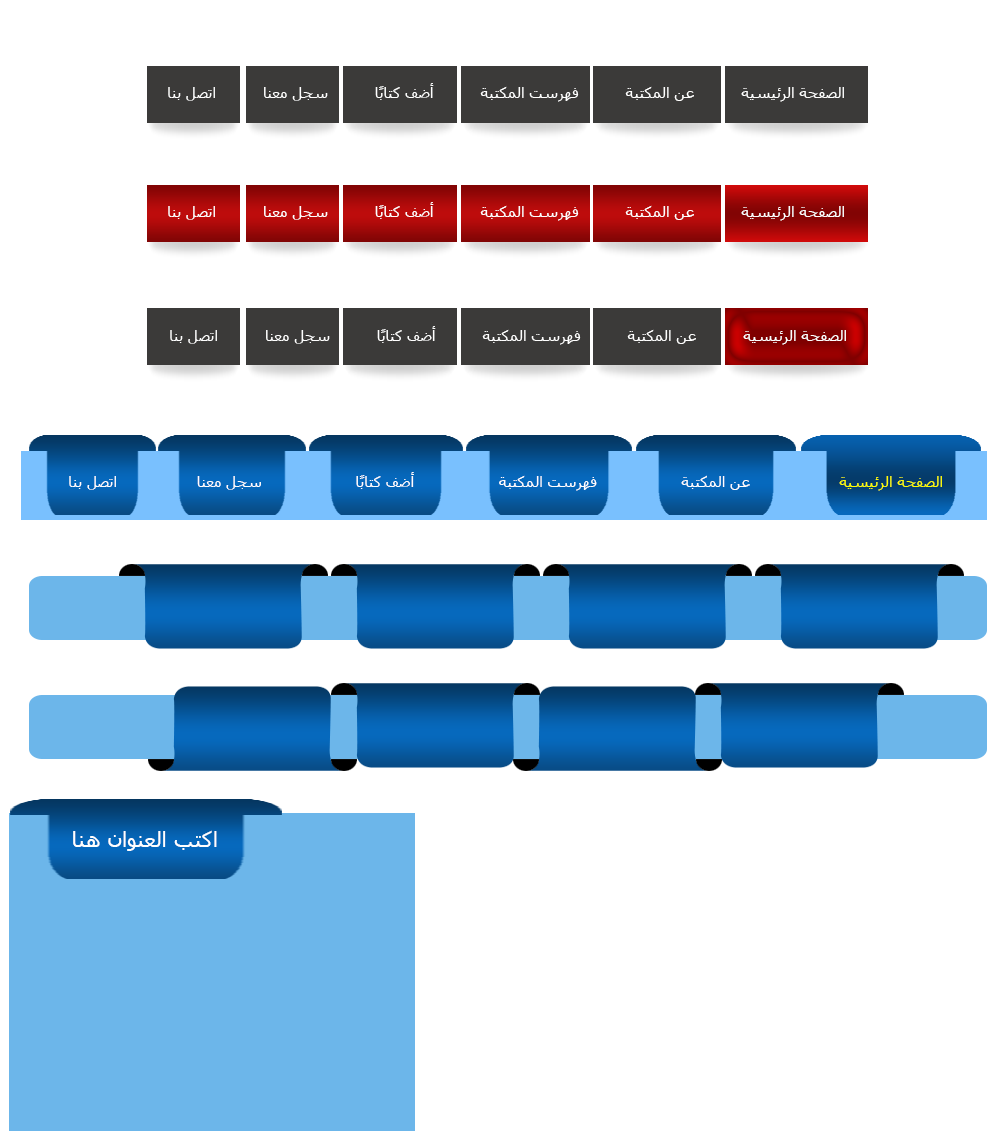
<style>
.page{position:relative;width:1000px;height:1138px;background:#ffffff}
.page>*{position:absolute;margin:0}
.t1{font:15px "Tahoma";color:#ffffff}
.t2{font:15px "Tahoma";color:#ffff00}
.t3{font:22px "Tahoma";color:#ffffff}
</style>
<div class="page">
<p class="t1" style="left:168px;top:83px;width:676px;height:19px">الصفحة الرئيسية          عن المكتبة          فهرست المكتبة          أضف كتابًا          سجل معنا          اتصل بنا</p>
<p class="t1" style="left:168px;top:202px;width:676px;height:19px">الصفحة الرئيسية          عن المكتبة          فهرست المكتبة          أضف كتابًا          سجل معنا          اتصل بنا</p>
<p class="t1" style="left:170px;top:326px;width:676px;height:19px">الصفحة الرئيسية          عن المكتبة          فهرست المكتبة          أضف كتابًا          سجل معنا          اتصل بنا</p>
<p class="t1" style="left:69px;top:472px;width:873px;height:19px"><span class="t2">الصفحة الرئيسية</span>                   عن المكتبة                  فهرست المكتبة                  أضف كتابًا                    سجل معنا                 اتصل بنا</p>
<p class="t3" style="left:73px;top:830px;width:144px;height:21px">اكتب العنوان هنا</p>
</div>
